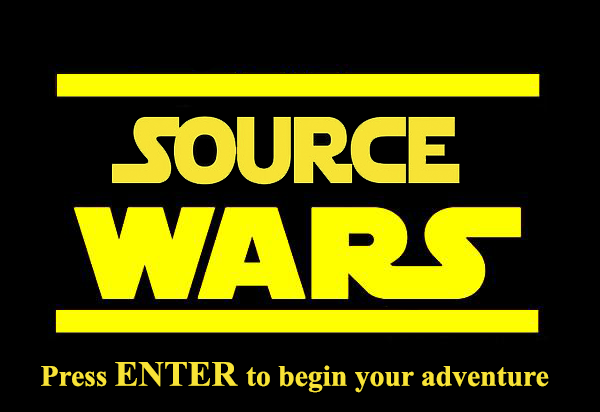
<style>
.page{position:relative;width:600px;height:412px;background:#000000}
.page>*{position:absolute;margin:0}
.t1{font:29.6px "TimesNewRomanPS-BoldMT";color:#f8e336}
.t2{font:35.6px "TimesNewRomanPS-BoldMT";color:#f8e336}
</style>
<div class="page">
<p class="t1" style="left:41px;top:362px;width:508px;height:31px">Press <span class="t2">ENTER </span>to begin your adventure</p>
</div>
